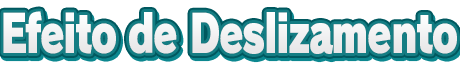
<style>
.page{position:relative;width:460px;height:72px;background:#ffffff}
.page>*{position:absolute;margin:0}
.t1{font:52px "RodinPro-UB";letter-spacing:-0.039em;color:#f0f0f1;scale:0.75 1}
</style>
<div class="page">
<p class="t1" style="left:3px;top:11px;width:454px;height:43px">Efeito de Deslizamento</p>
</div>
